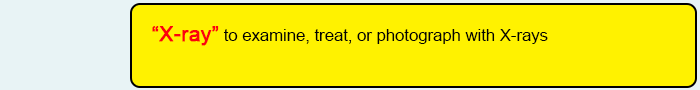
<style>
.page{position:relative;width:700px;height:90px;background:#fff200}
.page>*{position:absolute;margin:0}
.t1{font:16.7px "ArialMT";color:#020202}
.t2{font:20.8px "ArialMT";color:#fd010d;font-weight:bold}
</style>
<div class="page">
<p class="t1" style="left:152px;top:26px;width:396px;height:20px"><span class="t2">“X-ray”</span> to examine, treat, or photograph with X-rays</p>
</div>
